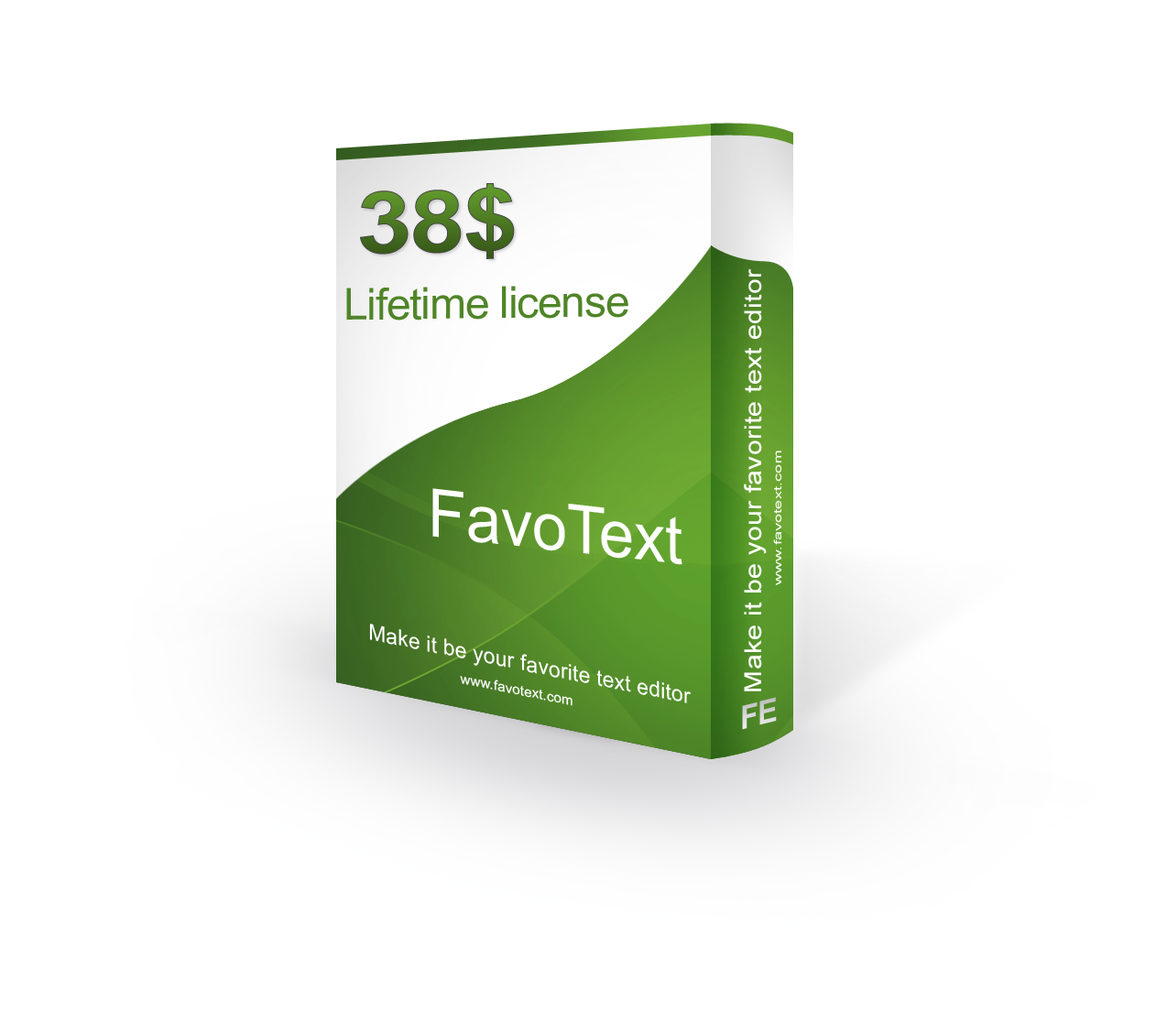
<style>
.page{position:relative;width:1167px;height:1022px;background:#ffffff}
.page>*{position:absolute;margin:0}
.t1{font:86.5px "Arial-BoldMT";letter-spacing:-0.025em;scale:1.16 1}
.t2{font:23.7px "ArialMT";letter-spacing:0.01em;color:#ffffff;scale:1.16 1}
.t3{font:44px "ArialMT";letter-spacing:-0.025em;color:#508528}
.t4{font:10.6px "ArialMT";letter-spacing:0.01em;color:#ffffff;scale:1.56 1}
.t5{font:66.8px "ArialMT";color:#ffffff;scale:0.95 1}
.t6{font:22px "ArialMT";letter-spacing:0.01em;color:#ffffff;scale:0.97 1}
.t7{font:13.7px "ArialMT";letter-spacing:0.01em;color:#ffffff}
.t8{font:32.7px "Arial-BoldMT";letter-spacing:-0.025em;color:#d4d4d4;scale:0.95 1}
</style>
<div class="page">
<p class="t1" style="left:360px;top:183px;width:155px;height:76px;rotate:-1deg">38$</p>
<p class="t2" style="left:744px;top:268px;width:23px;height:423px;rotate:-90deg">Make it be your favorite text editor</p>
<p class="t3" style="left:346px;top:286px;width:282px;height:35px;rotate:-1deg">Lifetime license</p>
<p class="t4" style="left:773px;top:451px;width:9px;height:134px;rotate:-90deg">www.favotext.com</p>
<p class="t5" style="left:432px;top:488px;width:250px;height:77px;rotate:7deg">FavoText</p>
<p class="t6" style="left:369px;top:624px;width:322px;height:79px;rotate:11deg">Make it be your favorite text editor</p>
<p class="t7" style="left:460px;top:676px;width:112px;height:30px;rotate:11deg">www.favotext.com</p>
<p class="t8" style="left:742px;top:697px;width:35px;height:33px;rotate:-14deg">FE</p>
</div>
